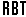
<style>
.page{position:relative;width:26px;height:17px;background:#ffffff}
.page>*{position:absolute;margin:0}
.t1{font:18.4px "Silom";letter-spacing:0.1em;color:#000000;scale:0.62 1}
</style>
<div class="page">
<p class="t1" style="left:3px;top:1px;width:23px;height:14px">RBT</p>
</div>
